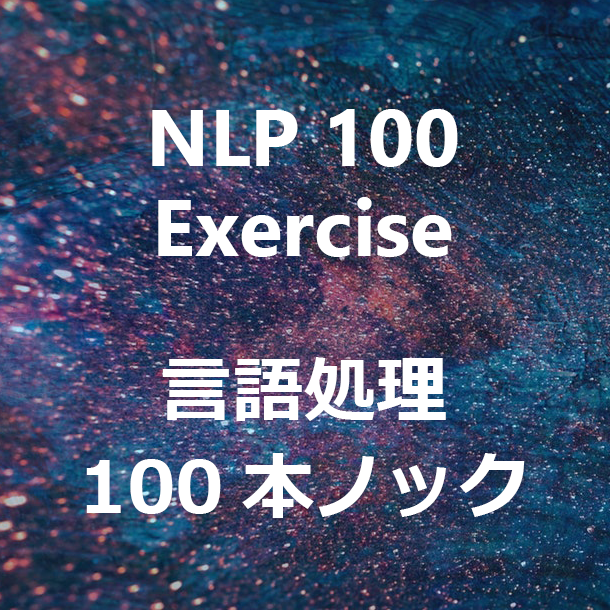
<style>
.page{position:relative;width:610px;height:610px}
.page>*{position:absolute;margin:0}
.t1{font:80px/90px "SegoeUI-Bold";color:#ffffff}
.t2{font:72px/96px "Meiryo-Bold";color:#ffffff}
</style>
<div class="page">
<p class="t1" style="left:152px;top:109px;width:306px;height:148px;text-align:center">NLP 100<br>Exercise</p>
<p class="t2" style="left:86px;top:357px;width:439px;height:161px;text-align:center">言語処理<br>100本ノック</p>
</div>
